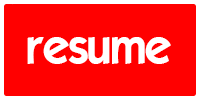
<style>
.page{position:relative;width:200px;height:100px;background:#ff0000}
.page>*{position:absolute;margin:0}
.t1{font:48px "ELEGANCE";color:#ffffff}
</style>
<div class="page">
<p class="t1" style="left:27px;top:37px;width:144px;height:27px">resume</p>
</div>
